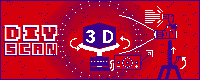
<style>
.page{position:relative;width:200px;height:80px;background:#d4000e}
.page>*{position:absolute;margin:0}
.t1{font:22px "OrigamiMommy"}
.t2{font:22px "OrigamiMommy";color:#ffffff}
.t3{font:16px "OrigamiMommy"}
.t4{font:16px "OrigamiMommy";color:#ffffff}
</style>
<div class="page">
<p class="t1" style="left:3px;top:26px;width:54px;height:16px">DIY</p>
<p class="t2" style="left:4px;top:25px;width:54px;height:16px">DIY</p>
<p class="t3" style="left:4px;top:44px;width:53px;height:12px">SCAN</p>
<p class="t4" style="left:5px;top:43px;width:53px;height:12px">SCAN</p>
</div>
